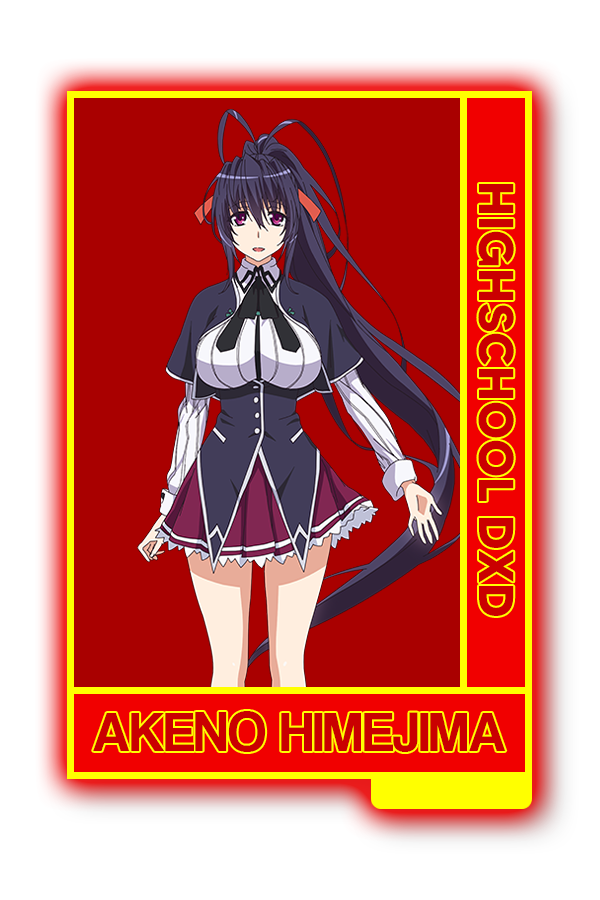
<style>
.page{position:relative;width:600px;height:900px;background:#a90000}
.page>*{position:absolute;margin:0}
.t1{font:48.8px "MADETOMMY-Bold";color:#ca0000}
.t2{font:56.7px "CoolveticaRg-Regular";color:#ca0000}
</style>
<div class="page">
<p class="t1" style="left:478px;top:184px;width:36px;height:432px;rotate:90deg">HIGHSCHOOL DXD</p>
<p class="t2" style="left:93px;top:711px;width:413px;height:41px">AKENO HIMEJIMA</p>
</div>
